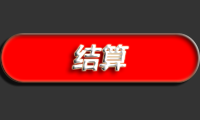
<style>
.page{position:relative;width:200px;height:120px;background:#333333}
.page>*{position:absolute;margin:0}
.t1{font:26.7px "MicrosoftYaHei-Bold";font-style:italic}
</style>
<div class="page">
<p class="t1" style="left:72px;top:44px;width:57px;height:27px">结算</p>
</div>
